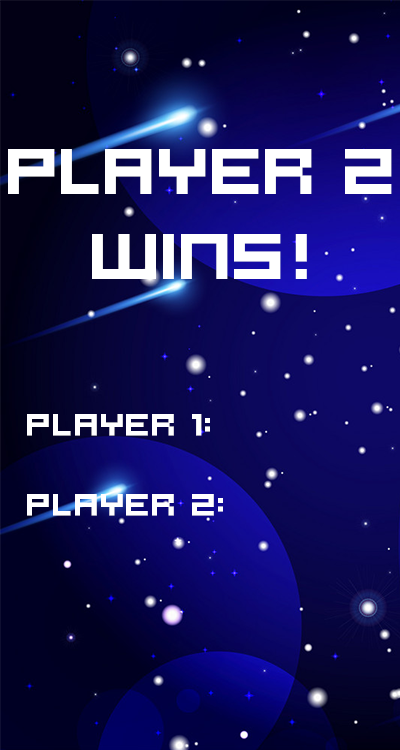
<style>
.page{position:relative;width:400px;height:750px}
.page>*{position:absolute;margin:0}
.t1{font:70.8px "Hooge0553";letter-spacing:-0.025em;color:#ffffff;font-weight:bold}
.t2{font:33.3px "Hooge0553";color:#ffffff;font-weight:bold}
</style>
<div class="page">
<p class="t1" style="left:8px;top:149px;width:384px;height:130px;text-align:center">PLAYER 2<br>WINS!</p>
<p class="t2" style="left:27px;top:414px;width:196px;height:102px">PLAYER 1:<br><br>PLAYER 2:</p>
</div>
